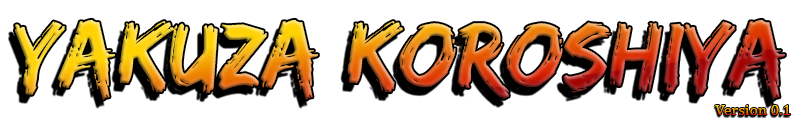
<style>
.page{position:relative;width:800px;height:120px;background:#ffffff}
.page>*{position:absolute;margin:0}
.t1{font:96px "EdoSZ"}
.t2{font:16px "Cambria"}
</style>
<div class="page">
<p class="t1" style="left:14px;top:19px;width:771px;height:81px">Yakuza Koroshiya</p>
<p class="t2" style="left:715px;top:105px;width:76px;height:10px">Version 0.1</p>
</div>
